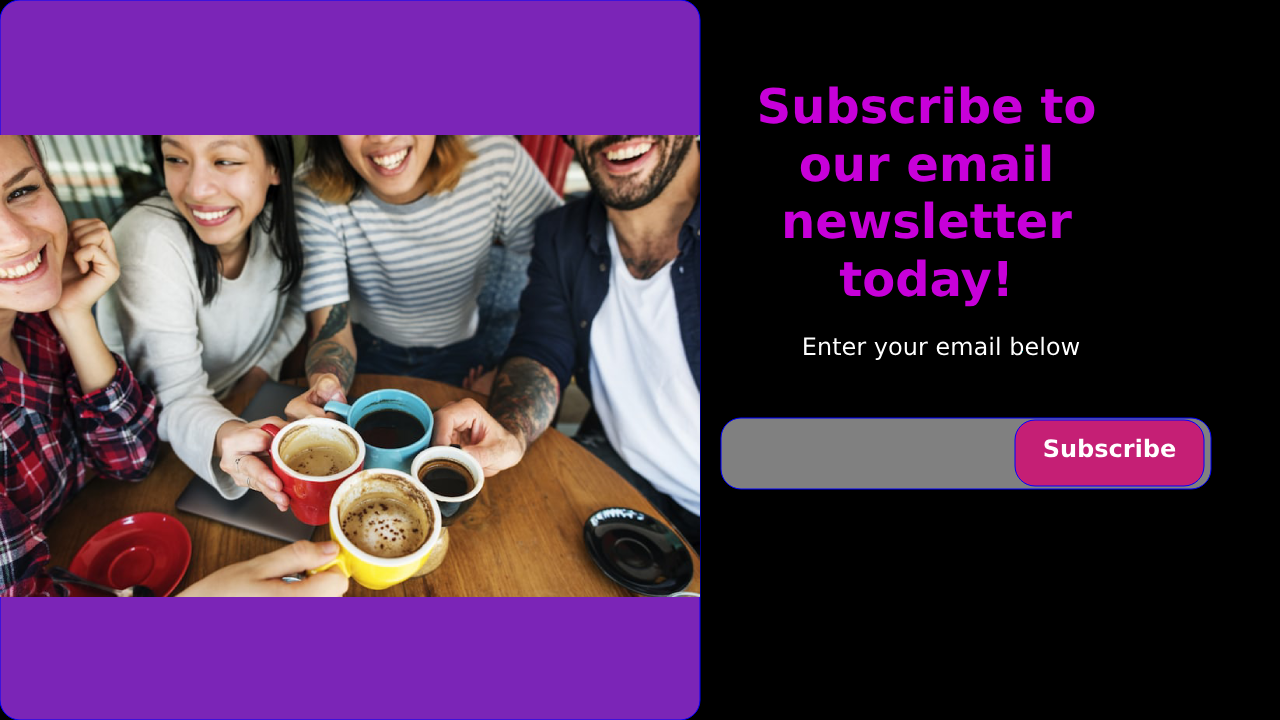
<style>
.page{position:relative;width:1280px;height:720px;background:#000000}
.page>*{position:absolute;margin:0}
.t1{font:48px "DejaVuSans-Bold";color:#c700d9}
.t2{font:24px "DejaVuSans";color:#ffffff}
</style>
<div class="page">
<p class="t1" style="left:760px;top:86px;width:335px;height:221px;text-align:center">Subscribe to our email newsletter today!</p>
<p class="t2" style="left:804px;top:336px;width:276px;height:24px">Enter your email below</p>
</div>
